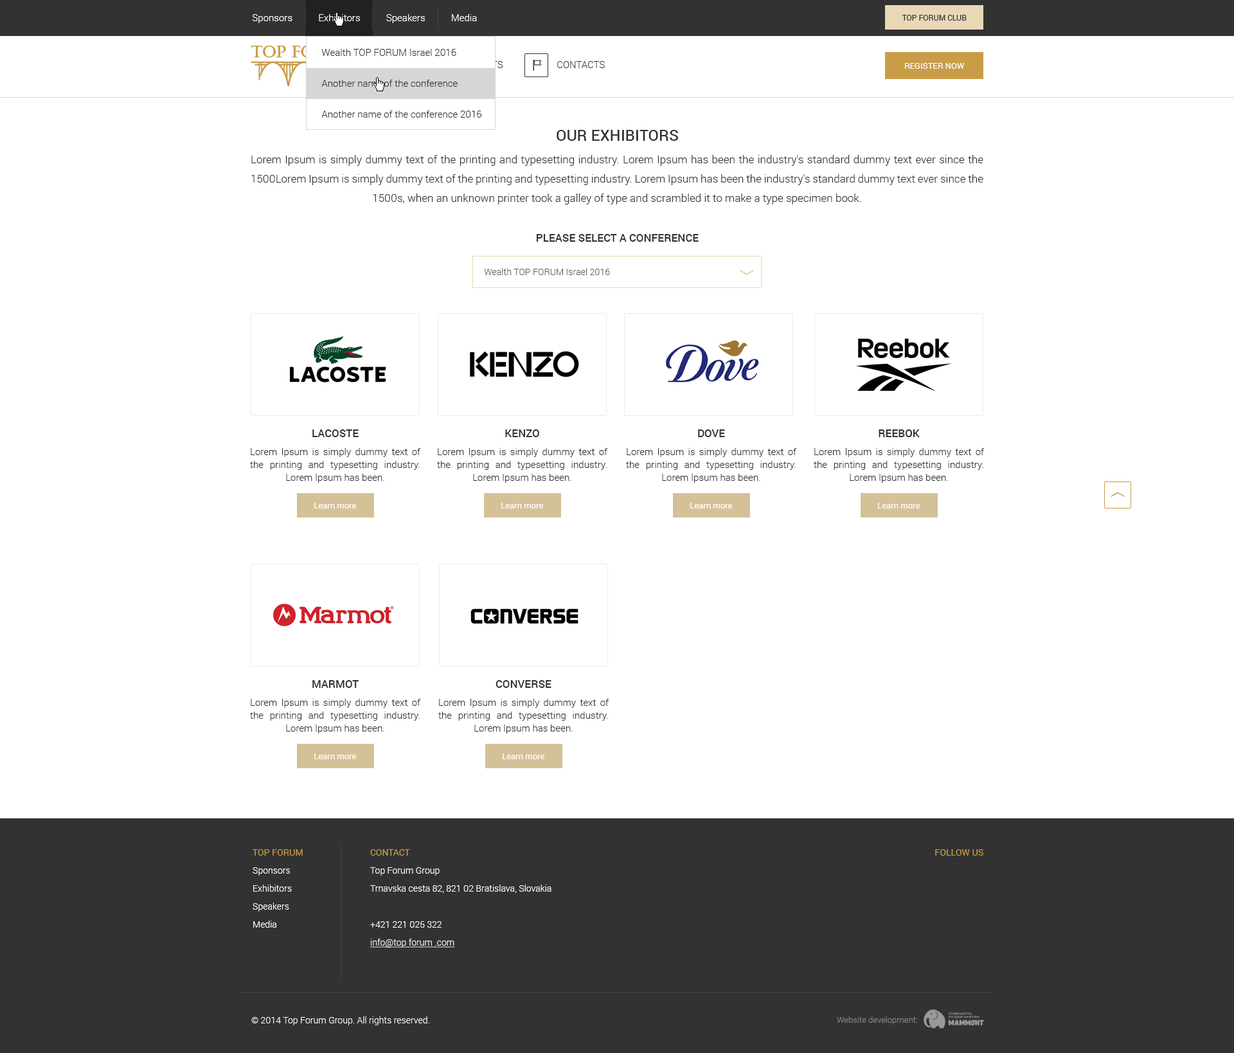
<style>
.page{position:relative;width:1234px;height:1053px;background:#ffffff}
.page>*{position:absolute;margin:0}
.t1{font:9.6px "Roboto-Light";color:#ffffff}
.t2{font:7.7px "Roboto-Regular";color:#323232}
.t3{font:9.6px/15.4px "Roboto-Light";color:#323232}
.t4{font:9.6px "Roboto-Light";color:#323232}
.t5{font:8.4px "Roboto-Regular";color:#ffffff}
.t6{font:15.4px "Roboto-Medium";color:#323232}
.t7{font:10.9px/19.3px "Roboto-Light";color:#323232}
.t8{font:10.9px "Roboto-Medium";color:#323232;text-transform:uppercase}
.t9{font:9px "Roboto-Light";color:#606060}
.t10{font:9.6px/12.9px "Roboto-Light";color:#323232}
.t11{font:10.9px/12.9px "Roboto-Medium";color:#323232;text-transform:uppercase}
.t12{font:10.9px/12.9px "Roboto-Medium";color:#323232}
.t13{font:9px/14.1px "Roboto-Light";color:#ffffff}
.t14{font:9px/14.1px "Roboto-Regular";color:#c99c47}
.t15{font:9px/14.1px "Roboto-Light";color:#f8f3e9;text-decoration:underline}
.t16{font:9px "Roboto-Regular";color:#c99c47}
.t17{font:9px "Roboto-Light";color:#f8f3e9}
.t18{font:8.4px "Roboto-Light";color:#858585}
</style>
<div class="page">
<p class="t1" style="left:252px;top:14px;width:225px;height:9px">Sponsors           Exhibitors           Speakers           Media</p>
<p class="t2" style="left:902px;top:15px;width:65px;height:6px">TOP FORUM CLUB</p>
<p class="t3" style="left:321px;top:49px;width:161px;height:69px">Wealth TOP FORUM Israel 2016<br>Another name of the conference<br>Another name of the conference 2016</p>
<p class="t4" style="left:557px;top:61px;width:48px;height:7px">CONTACTS</p>
<p class="t5" style="left:905px;top:63px;width:60px;height:6px">REGISTER NOW</p>
<p class="t6" style="left:557px;top:130px;width:121px;height:11px">OUR EXHIBITORS</p>
<p class="t7" style="left:251px;top:155px;width:733px;height:49px;text-align:justify">Lorem Ipsum is simply dummy text of the printing and typesetting industry. Lorem Ipsum has been the industry's standard dummy text ever since the 1500Lorem Ipsum is simply dummy text of the printing and typesetting industry. Lorem Ipsum has been the industry's standard dummy text ever since the 1500s, when an unknown printer took a galley of type and scrambled it to make a type specimen book.</p>
<p class="t8" style="left:536px;top:234px;width:163px;height:8px">please select a conference</p>
<p class="t9" style="left:484px;top:268px;width:126px;height:7px">Wealth TOP FORUM Israel 2016</p>
<p class="t10" style="left:250px;top:429px;width:171px;height:54px;text-align:justify"><span class="t11">lacoste<br></span>Lorem Ipsum is simply dummy text of the printing and typesetting industry. Lorem Ipsum has been.</p>
<p class="t10" style="left:437px;top:429px;width:171px;height:54px;text-align:justify"><span class="t12">KENZO<br></span>Lorem Ipsum is simply dummy text of the printing and typesetting industry. Lorem Ipsum has been.</p>
<p class="t10" style="left:626px;top:429px;width:171px;height:54px;text-align:justify"><span class="t11">dove<br></span>Lorem Ipsum is simply dummy text of the printing and typesetting industry. Lorem Ipsum has been.</p>
<p class="t10" style="left:814px;top:429px;width:171px;height:54px;text-align:justify"><span class="t11">reebok<br></span>Lorem Ipsum is simply dummy text of the printing and typesetting industry. Lorem Ipsum has been.</p>
<p class="t5" style="left:314px;top:503px;width:42px;height:6px">Learn more</p>
<p class="t5" style="left:501px;top:503px;width:42px;height:6px">Learn more</p>
<p class="t5" style="left:690px;top:503px;width:42px;height:6px">Learn more</p>
<p class="t5" style="left:878px;top:503px;width:42px;height:6px">Learn more</p>
<p class="t10" style="left:250px;top:680px;width:171px;height:54px;text-align:justify"><span class="t11">marmot<br></span>Lorem Ipsum is simply dummy text of the printing and typesetting industry. Lorem Ipsum has been.</p>
<p class="t10" style="left:438px;top:680px;width:171px;height:54px;text-align:justify"><span class="t11">converse<br></span>Lorem Ipsum is simply dummy text of the printing and typesetting industry. Lorem Ipsum has been.</p>
<p class="t5" style="left:314px;top:753px;width:42px;height:6px">Learn more</p>
<p class="t5" style="left:503px;top:753px;width:41px;height:6px">Learn more</p>
<p class="t13" style="left:253px;top:849px;width:50px;height:79px;text-align:justify"><span class="t14">TOP FORUM<br></span>Sponsors<br>Exhibitors <br>Speakers<br>Media</p>
<p class="t13" style="left:370px;top:849px;width:182px;height:99px;text-align:justify"><span class="t14">CONTACT<br></span>Top Forum Group<br>Trnavska cesta 82, 821 02 Bratislava, Slovakia<br> <br>+421 221 025 322<br><span class="t15">info@top forum .com</span></p>
<p class="t16" style="left:935px;top:849px;width:49px;height:7px">FOLLOW US</p>
<p class="t17" style="left:251px;top:1016px;width:178px;height:9px">© 2014 Top Forum Group. All rights reserved.</p>
<p class="t18" style="left:837px;top:1016px;width:81px;height:9px">Website development:</p>
</div>
